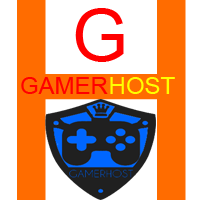
<style>
.page{position:relative;width:200px;height:200px;background:#ffffff}
.page>*{position:absolute;margin:0}
.t1{font:72px "ArialMT";color:#ff0000}
.t2{font:24px "ArialMT";color:#ff0000}
.t3{font:24px "ArialMT";color:#ffff00}
</style>
<div class="page">
<p class="t1" style="left:75px;top:8px;width:49px;height:54px">G</p>
<p class="t2" style="left:21px;top:77px;width:87px;height:17px">GAMER</p>
<p class="t3" style="left:110px;top:77px;width:65px;height:17px">HOST</p>
</div>
